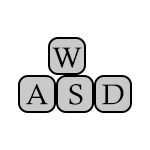
<style>
.page{position:relative;width:150px;height:150px;background:#ffffff}
.page>*{position:absolute;margin:0}
.t1{font:28.3px "CalistoMT";color:#000000;text-transform:uppercase}
</style>
<div class="page">
<p class="t1" style="left:52px;top:47px;width:30px;height:21px">W</p>
<p class="t1" style="left:26px;top:84px;width:22px;height:21px">A</p>
<p class="t1" style="left:69px;top:84px;width:14px;height:21px">S</p>
<p class="t1" style="left:102px;top:84px;width:22px;height:21px">D</p>
</div>
